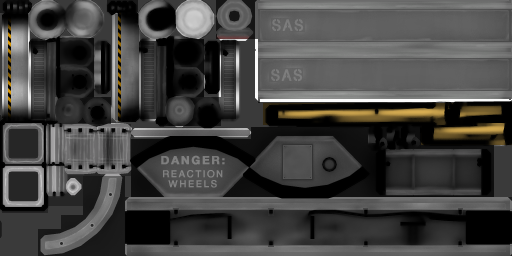
<style>
.page{position:relative;width:512px;height:256px}
.page>*{position:absolute;margin:0}
.t1{font:15.4px "HelveticaNeue";letter-spacing:0.13em;color:#797979;font-weight:bold;scale:0.9 1}
.t2{font:15.4px "HelveticaNeue";letter-spacing:0.13em;color:#7c7c7c;font-weight:bold;scale:0.9 1}
.t3{font:9.4px "HelveticaNeue-Medium";letter-spacing:0.13em;color:#808080;font-weight:bold;scale:1.04 1}
.t4{font:11.1px "HelveticaNeue-Bold";letter-spacing:0.13em;color:#808080;font-weight:bold;scale:1.04 1}
</style>
<div class="page">
<p class="t1" style="left:272px;top:19px;width:32px;height:13px">SAS</p>
<p class="t2" style="left:271px;top:69px;width:32px;height:13px">SAS</p>
<p class="t3" style="left:161px;top:155px;width:64px;height:33px;text-align:center"><span class="t4">DANGER:<br></span>REACTION<br>WHEELS</p>
</div>
